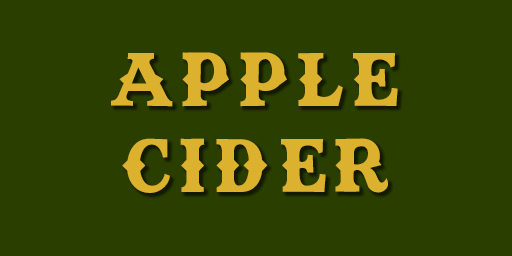
<style>
.page{position:relative;width:512px;height:256px;background:#2a3e00}
.page>*{position:absolute;margin:0}
.t1{font:72px "TexasTangoBOLDPERSONALUSE";letter-spacing:0.1em;color:#dcb12e}
</style>
<div class="page">
<p class="t1" style="left:111px;top:52px;width:287px;height:141px;text-align:center">APPLE<br>CIDER</p>
</div>
